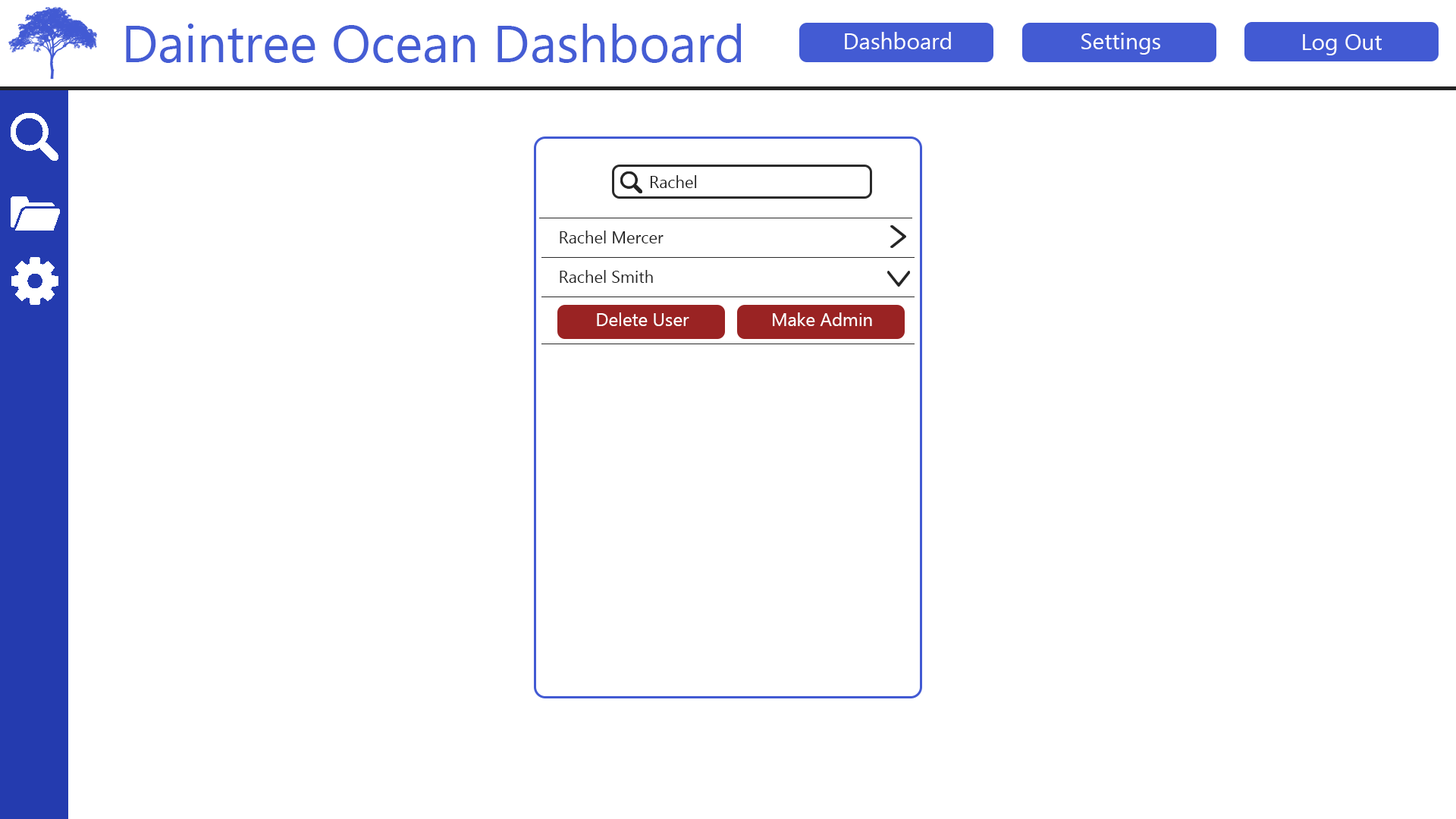
<style>
.page{position:relative;width:1456px;height:819px;background:#ffffff}
.page>*{position:absolute;margin:0}
.t1{font:52.3px "MyanmarText";color:#455dd4}
.t2{font:22.7px "MyanmarText";color:#ffffff}
.t3{font:16.7px "MyanmarText";color:#232323}
.t4{font:18.2px "MyanmarText";color:#ffffff}
</style>
<div class="page">
<p class="t1" style="left:126px;top:24px;width:615px;height:39px">Daintree Ocean Dashboard</p>
<p class="t2" style="left:845px;top:32px;width:106px;height:17px">Dashboard</p>
<p class="t2" style="left:1081px;top:33px;width:79px;height:22px">Settings</p>
<p class="t2" style="left:1303px;top:34px;width:79px;height:21px">Log Out</p>
<p class="t3" style="left:650px;top:175px;width:47px;height:13px">Rachel</p>
<p class="t3" style="left:560px;top:231px;width:104px;height:12px">Rachel Mercer</p>
<p class="t3" style="left:560px;top:270px;width:93px;height:13px">Rachel Smith</p>
<p class="t4" style="left:597px;top:312px;width:92px;height:14px">Delete User</p>
<p class="t4" style="left:773px;top:312px;width:99px;height:14px">Make Admin</p>
</div>
